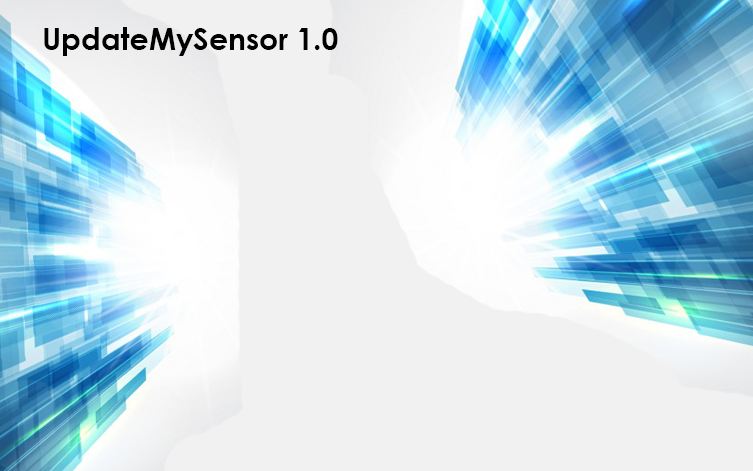
<style>
.page{position:relative;width:753px;height:471px;background:#f1f1f1}
.page>*{position:absolute;margin:0}
.t1{font:30px "CenturyGothic-Bold";color:#000000}
</style>
<div class="page">
<p class="t1" style="left:44px;top:27px;width:294px;height:29px">UpdateMySensor 1.0</p>
</div>
